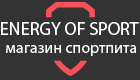
<style>
.page{position:relative;width:140px;height:80px;background:#333333}
.page>*{position:absolute;margin:0}
.t1{font:18px "MyriadPro-Regular";color:#ffffff}
.t2{font:16px "MyriadPro-Regular";color:#ffffff}
</style>
<div class="page">
<p class="t1" style="left:1px;top:22px;width:138px;height:13px">ENERGY OF SPORT</p>
<p class="t2" style="left:6px;top:45px;width:131px;height:11px">магазин спортпита</p>
</div>
